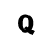
<style>
.page{position:relative;width:50px;height:50px;background:#ffffff}
.page>*{position:absolute;margin:0}
.t1{font:25px "Algerian";color:#000000;font-weight:bold}
</style>
<div class="page">
<p class="t1" style="left:18px;top:14px;width:17px;height:21px">q</p>
</div>
